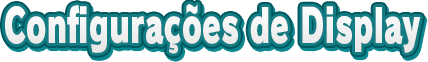
<style>
.page{position:relative;width:428px;height:62px;background:#ffffff}
.page>*{position:absolute;margin:0}
.t1{font:46.7px "RodinPro-UB";letter-spacing:0.004em;color:#f2f2f3;scale:0.64 1}
</style>
<div class="page">
<p class="t1" style="left:5px;top:4px;width:416px;height:50px">Configurações de Display</p>
</div>
